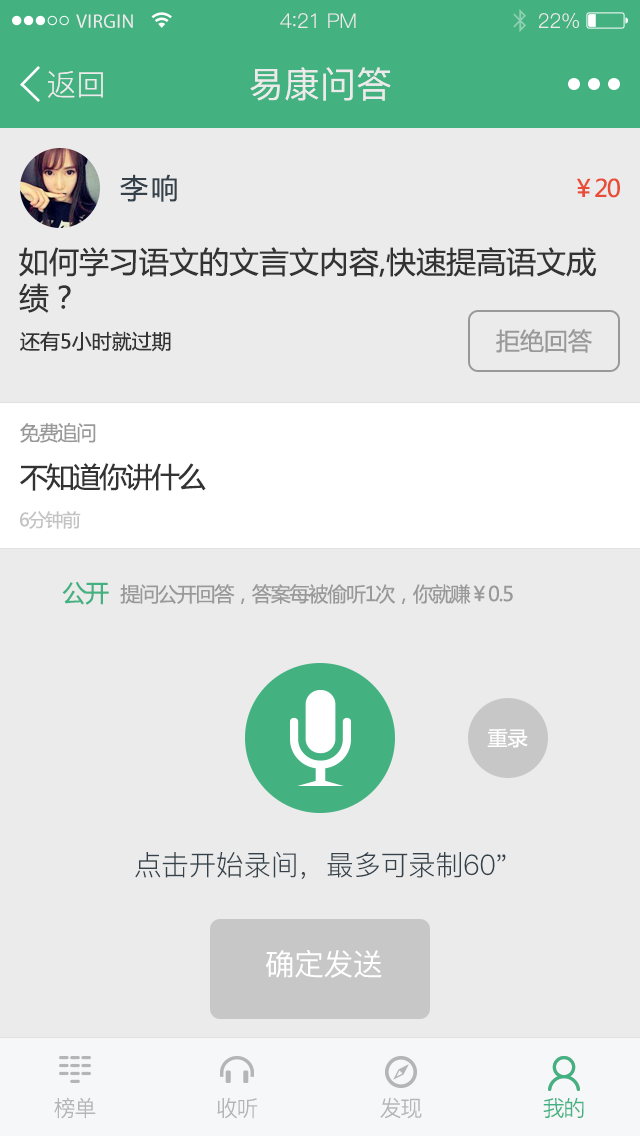
<style>
.page{position:relative;width:640px;height:1136px;background:#ebebeb}
.page>*{position:absolute;margin:0}
.t1{font:19.6px "MyriadPro-Regular";letter-spacing:0.02em;color:#ebebeb}
.t2{font:20.4px "PingFang-SC-Regular";letter-spacing:-0.02em;color:#ebebeb}
.t3{font:22.1px "PingFang-SC-Regular";letter-spacing:-0.02em;color:#ebebeb}
.t4{font:30px "PingFang-SC-Regular";color:#ebebeb}
.t5{font:36px "PingFang-SC-Medium";color:#ebebeb}
.t6{font:28px "MicrosoftYaHei";letter-spacing:0.1em;color:#35424b}
.t7{font:24px "MicrosoftYaHei";letter-spacing:-0.06em;color:#e94c37}
.t8{font:30px/36px "MicrosoftYaHei";color:#333333}
.t9{font:24px "MicrosoftYaHei";color:#999999}
.t10{font:20px "MicrosoftYaHei";color:#333333}
.t11{font:20px "MicrosoftYaHei";letter-spacing:-0.06em;color:#999999}
.t12{font:28px "MicrosoftYaHei";letter-spacing:-0.06em;color:#333333}
.t13{font:18px "MicrosoftYaHei";letter-spacing:-0.06em;color:#c3c3c3}
.t14{font:24px "MicrosoftYaHei";letter-spacing:-0.06em;color:#44b181}
.t15{font:20px "MicrosoftYaHei";color:#ffffff}
.t16{font:28px "PingFang-SC-Regular";letter-spacing:-0.02em;color:#35424b}
.t17{font:30px "PingFang-SC-Medium";letter-spacing:-0.02em;color:#ffffff}
.t18{font:22px "PingFang-SC-Regular";letter-spacing:-0.06em;color:#b4b5b6}
.t19{font:22px "PingFang-SC-Regular";letter-spacing:-0.06em;color:#44b181}
</style>
<div class="page">
<p class="t1" style="left:76px;top:14px;width:57px;height:14px">VIRGIN</p>
<p class="t2" style="left:280px;top:13px;width:76px;height:15px">4<span class="t3">:</span>21 PM</p>
<p class="t2" style="left:539px;top:13px;width:40px;height:16px">22%</p>
<p class="t4" style="left:48px;top:71px;width:55px;height:27px">返回</p>
<p class="t5" style="left:250px;top:67px;width:141px;height:34px">易康问答</p>
<p class="t6" style="left:120px;top:174px;width:57px;height:28px">李响</p>
<p class="t7" style="left:577px;top:178px;width:43px;height:20px">￥20</p>
<p class="t8" style="left:19px;top:247px;width:578px;height:66px">如何学习语文的文言文内容,快速提高语文成<br>绩？</p>
<p class="t9" style="left:496px;top:329px;width:96px;height:24px">拒绝回答</p>
<p class="t10" style="left:20px;top:331px;width:151px;height:21px">还有5小时就过期</p>
<p class="t11" style="left:20px;top:423px;width:76px;height:20px">免费追问</p>
<p class="t12" style="left:20px;top:463px;width:186px;height:28px">不知道你讲什么</p>
<p class="t13" style="left:20px;top:511px;width:61px;height:18px">6分钟前</p>
<p class="t14" style="left:62px;top:581px;width:47px;height:24px">公开</p>
<p class="t11" style="left:120px;top:584px;width:393px;height:20px">提问公开回答，答案每被偷听1次，你就赚￥0.5</p>
<p class="t15" style="left:487px;top:728px;width:41px;height:20px">重录</p>
<p class="t16" style="left:135px;top:851px;width:371px;height:28px">点击开始录间，最多可录制60"</p>
<p class="t17" style="left:266px;top:950px;width:116px;height:28px">确定发送</p>
<p class="t18" style="left:54px;top:1097px;width:42px;height:22px">榜单</p>
<p class="t18" style="left:380px;top:1097px;width:42px;height:22px">发现</p>
<p class="t19" style="left:543px;top:1097px;width:41px;height:21px">我的</p>
<p class="t18" style="left:217px;top:1098px;width:41px;height:21px">收听</p>
</div>
